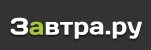
<style>
.page{position:relative;width:151px;height:50px;background:#333333}
.page>*{position:absolute;margin:0}
.t1{font:24px "Days";color:#feffff}
.t2{font:24px "Days";color:#a4c639}
</style>
<div class="page">
<p class="t1" style="left:10px;top:17px;width:132px;height:22px">З<span class="t2">а</span>втра.ру</p>
</div>
